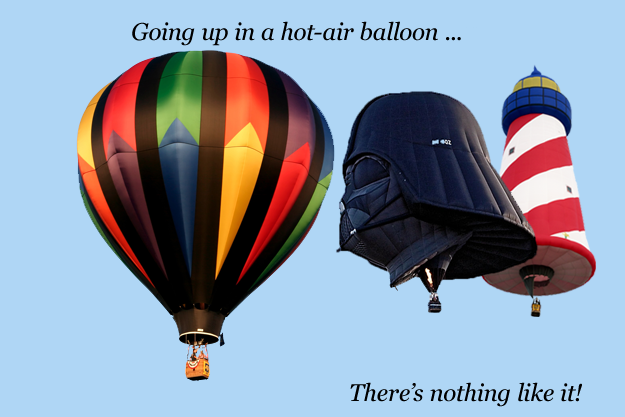
<style>
.page{position:relative;width:625px;height:417px;background:#afd6f5}
.page>*{position:absolute;margin:0}
.t1{font:24px "Georgia-Italic";color:#000000}
</style>
<div class="page">
<p class="t1" style="left:132px;top:21px;width:329px;height:25px">Going up in a hot-air balloon ...</p>
<p class="t1" style="left:350px;top:382px;width:232px;height:25px">There’s nothing like it!</p>
</div>
